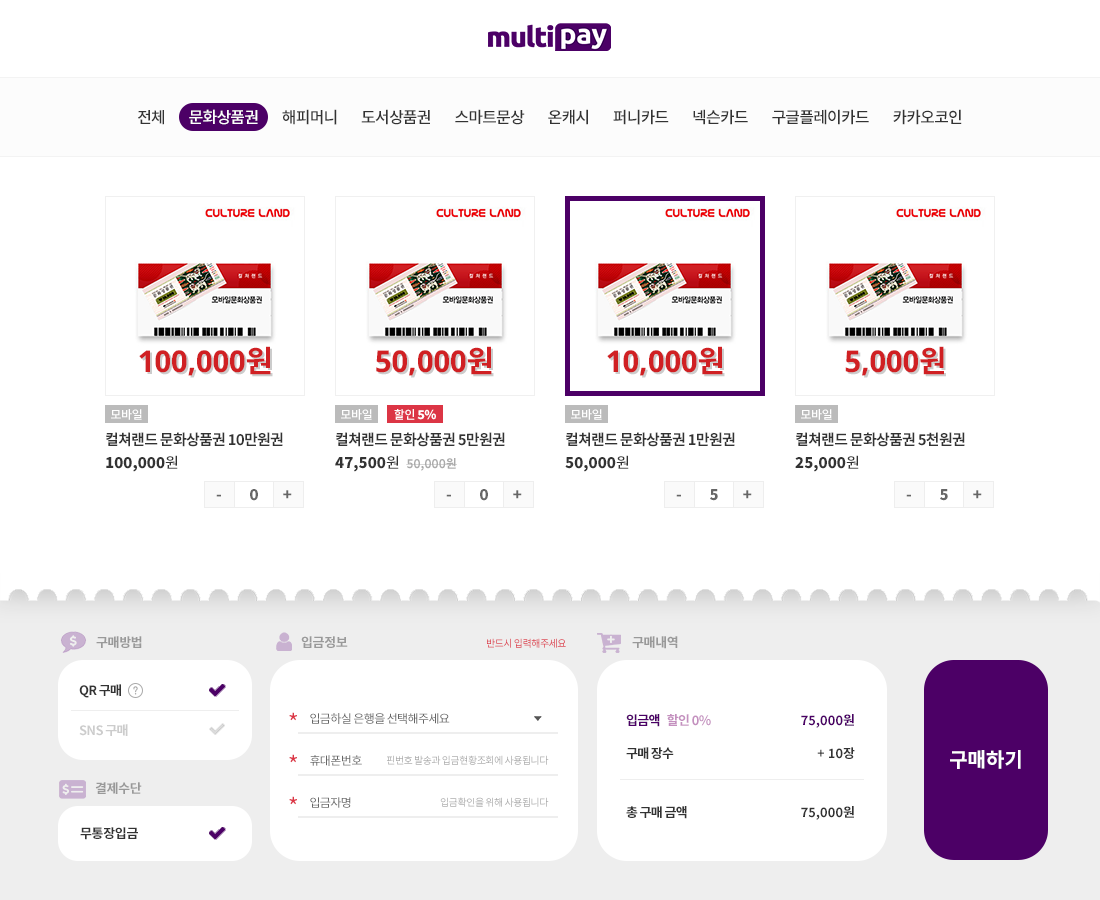
<style>
.page{position:relative;width:1100px;height:900px;background:#ffffff}
.page>*{position:absolute;margin:0}
.t1{font:16px "NotoSansKR-Medium";letter-spacing:-0.05em;color:#333333}
.t2{font:16px "NotoSansKR-Medium";letter-spacing:-0.05em;color:#ffffff}
.t3{font:30px "NotoSans-Bold";color:#d02023}
.t4{font:30px "NotoSansKR-Bold";color:#d02023}
.t5{font:12px "NotoSansKR-Medium";letter-spacing:-0.025em;color:#ffffff}
.t6{font:12px "NotoSansKR-Black";letter-spacing:-0.025em;color:#ffffff}
.t7{font:15px/23px "NotoSansKR-Bold";letter-spacing:-0.05em;color:#333333}
.t8{font:15px/23px "NotoSansKR-Black";color:#333333}
.t9{font:15px/23px "NotoSansKR-Medium";color:#333333}
.t10{font:12px/23px "NotoSansKR-Bold";color:#aaaaaa}
.t11{font:15px "NotoSansKR-Black";letter-spacing:-0.05em;color:#666666}
.t12{font:13px "NotoSansKR-Bold";letter-spacing:-0.025em;color:#999999}
.t13{font:10px "NotoSansKR-Regular";letter-spacing:-0.05em}
.t14{font:12px "NotoSansKR-Regular";letter-spacing:-0.05em}
.t15{font:13px/40px "NotoSansKR-Bold";letter-spacing:-0.05em;color:#cccccc}
.t16{font:13px/40px "NotoSansKR-Bold";letter-spacing:-0.05em;color:#333333}
.t17{font:10px "Jua-Regular";color:#aaaaaa}
.t18{font:23px/42px "NotoSansKR-Regular";letter-spacing:-0.05em;color:#dc3545}
.t19{font:12px "NotoSansKR-Regular";letter-spacing:-0.05em;color:#666666}
.t20{font:13px/26px "NotoSansKR-Bold";letter-spacing:-0.05em;color:#333333}
.t21{font:13px/33px "NotoSansKR-Bold";letter-spacing:-0.05em;color:#4c0066}
.t22{font:13px/33px "NotoSansKR-Bold";letter-spacing:-0.05em;color:#c490bf}
.t23{font:13px/33px "NotoSansKR-Bold";letter-spacing:-0.05em;color:#333333}
.t24{font:13px/33px "NotoSansKR-Bold";color:#4c0066}
.t25{font:13px/33px "NotoSansKR-Bold";color:#333333}
.t26{font:13px/26px "NotoSansKR-Bold";color:#333333}
.t27{font:20px "NotoSansKR-Bold";color:#ffffff}
.t28{font:10px "NotoSansKR-Regular";letter-spacing:-0.05em;color:#aaaaaa}
.t29{font:13px "NotoSansKR-Bold";letter-spacing:-0.025em;color:#333333}
</style>
<div class="page">
<p class="t1" style="left:138px;top:109px;width:824px;height:16px">전체　   <span class="t2">문화상품권   </span>　해피머니　   도서상품권　   스마트문상　   온캐시　   퍼니카드　   넥슨카드　   구글플레이카드   　카카오코인</p>
<p class="t3" style="left:139px;top:346px;width:132px;height:30px">100,000<span class="t4">원</span></p>
<p class="t3" style="left:376px;top:346px;width:116px;height:30px">50,000<span class="t4">원</span></p>
<p class="t3" style="left:607px;top:346px;width:116px;height:30px">10,000<span class="t4">원</span></p>
<p class="t3" style="left:845px;top:346px;width:99px;height:30px">5,000<span class="t4">원</span></p>
<p class="t5" style="left:111px;top:409px;width:31px;height:11px">모바일</p>
<p class="t5" style="left:341px;top:409px;width:31px;height:11px">모바일</p>
<p class="t5" style="left:394px;top:409px;width:42px;height:11px">할인 <span class="t6">5%</span></p>
<p class="t5" style="left:571px;top:409px;width:31px;height:11px">모바일</p>
<p class="t5" style="left:801px;top:409px;width:31px;height:11px">모바일</p>
<p class="t7" style="left:106px;top:432px;width:177px;height:40px">컬쳐랜드 문화상품권 10만원권<br><span class="t8">100,000</span><span class="t9">원</span></p>
<p class="t7" style="left:335px;top:432px;width:170px;height:40px">컬쳐랜드 문화상품권 5만원권<br><span class="t8">47,500</span><span class="t9">원  </span><span class="t10">50,000원</span></p>
<p class="t7" style="left:565px;top:432px;width:170px;height:40px">컬쳐랜드 문화상품권 1만원권<br><span class="t8">50,000</span><span class="t9">원</span></p>
<p class="t7" style="left:795px;top:432px;width:170px;height:40px">컬쳐랜드 문화상품권 5천원권<br><span class="t8">25,000</span><span class="t9">원</span></p>
<p class="t11" style="left:216px;top:490px;width:76px;height:9px">-                       +</p>
<p class="t11" style="left:250px;top:489px;width:8px;height:12px">0</p>
<p class="t11" style="left:446px;top:490px;width:76px;height:9px">-                       +</p>
<p class="t11" style="left:480px;top:489px;width:8px;height:12px">0</p>
<p class="t11" style="left:676px;top:490px;width:76px;height:9px">-                       +</p>
<p class="t11" style="left:710px;top:489px;width:8px;height:12px">5</p>
<p class="t11" style="left:906px;top:490px;width:76px;height:9px">-                       +</p>
<p class="t11" style="left:940px;top:489px;width:8px;height:12px">5</p>
<p class="t12" style="left:96px;top:636px;width:46px;height:12px">구매방법</p>
<p class="t12" style="left:301px;top:636px;width:47px;height:12px">입금정보</p>
<p class="t13" style="left:487px;top:638px;width:79px;height:10px"><span class="t14"> </span><br>반드시 입력해주세요</p>
<p class="t12" style="left:632px;top:636px;width:46px;height:13px">구매내역</p>
<p class="t15" style="left:79px;top:684px;width:49px;height:52px"><span class="t16">QR 구매<br></span>SNS 구매</p>
<p class="t17" style="left:133px;top:686px;width:5px;height:9px">?</p>
<p class="t18" style="left:289px;top:712px;width:8px;height:93px">*<br>*<br>*</p>
<p class="t19" style="left:310px;top:713px;width:140px;height:11px">입금하실 은행을 선택해주세요</p>
<p class="t20" style="left:626px;top:714px;width:85px;height:105px"><span class="t21">입금액　  </span><span class="t22">할인 0%<br></span><span class="t23">구매 장수<br></span><br>총 구매 금액</p>
<p class="t24" style="left:801px;top:714px;width:54px;height:106px;text-align:right">75,000원<br><span class="t25">+ 10장<br></span><span class="t26"><br>75,000원</span></p>
<p class="t27" style="left:950px;top:750px;width:71px;height:19px">구매하기</p>
<p class="t28" style="left:310px;top:755px;width:239px;height:11px"><span class="t19">　휴대폰번호 </span><br>핀번호 발송과 입금현황조회에 사용됩니다</p>
<p class="t12" style="left:95px;top:782px;width:47px;height:12px">결제수단</p>
<p class="t28" style="left:310px;top:797px;width:239px;height:11px"><span class="t19">　입금자명 </span><br>입금확인을 위해 사용됩니다</p>
<p class="t29" style="left:80px;top:827px;width:58px;height:13px">무통장입금</p>
</div>
